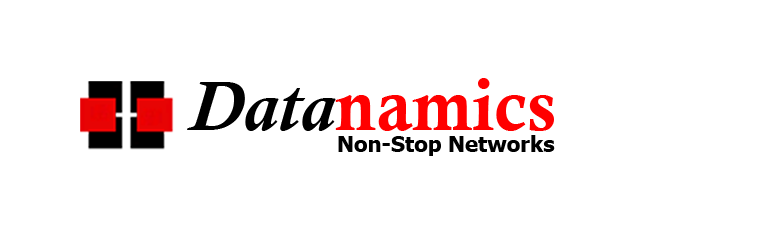
<style>
.page{position:relative;width:760px;height:244px;background:#ffffff}
.page>*{position:absolute;margin:0}
.t1{font:72px "CalisMTBol";color:#ff0000}
.t2{font:72px "CalistoMT-BoldItalic";color:#000000}
.t3{font:22px "Tahoma-Bold";color:#000000}
</style>
<div class="page">
<p class="t1" style="left:187px;top:78px;width:367px;height:53px"><span class="t2">Data</span>namics</p>
<p class="t3" style="left:338px;top:135px;width:217px;height:21px">Non-Stop Networks</p>
</div>
